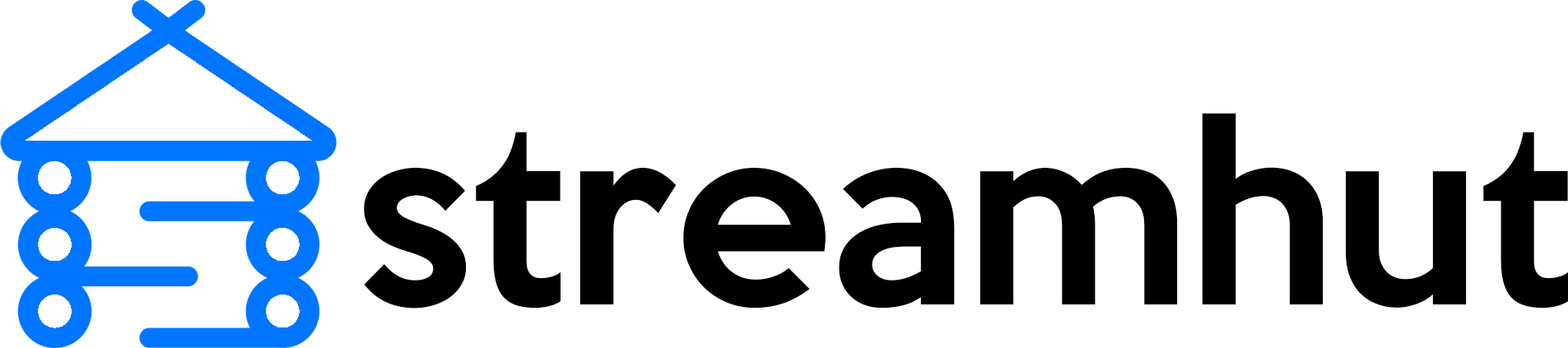
<style>
.page{position:relative;width:1568px;height:348px;background:#ffffff}
.page>*{position:absolute;margin:0}
.t1{font:230.5px "KeepCalm-Medium";color:#000000}
</style>
<div class="page">
<p class="t1" style="left:364px;top:113px;width:1204px;height:196px">streamhut</p>
</div>
